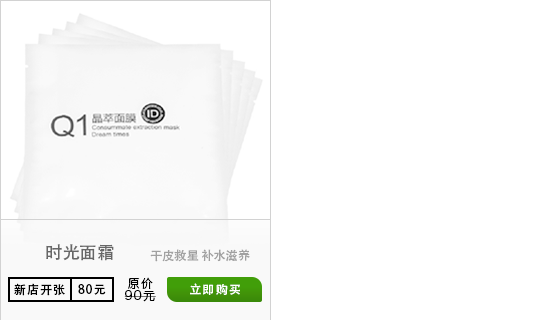
<style>
.page{position:relative;width:540px;height:320px;background:#ffffff}
.page>*{position:absolute;margin:0}
.t1{font:17.4px "AdobeHeitiStd-Regular";color:#676767}
.t2{font:12.2px "AdobeHeitiStd-Regular";color:#a1a1a1}
.t3{font:12.2px "HiraginoSansGB-W3";letter-spacing:0.075em;color:#000000}
.t4{font:12.2px "AdobeHeitiStd-Regular";letter-spacing:0.075em;color:#000000}
.t5{font:12.2px "AdobeHeitiStd-Regular";letter-spacing:0.075em;color:#ffffff}
</style>
<div class="page">
<p class="t1" style="left:46px;top:244px;width:68px;height:17px">时光面霜</p>
<p class="t2" style="left:150px;top:249px;width:100px;height:13px">干皮救星 补水滋养</p>
<p class="t3" style="left:128px;top:277px;width:25px;height:12px">原价</p>
<p class="t4" style="left:14px;top:283px;width:51px;height:13px">新店开张</p>
<p class="t4" style="left:78px;top:284px;width:28px;height:11px">80元</p>
<p class="t3" style="left:124px;top:290px;width:32px;height:12px">90元</p>
<p class="t5" style="left:190px;top:283px;width:50px;height:12px">立即购买</p>
</div>
